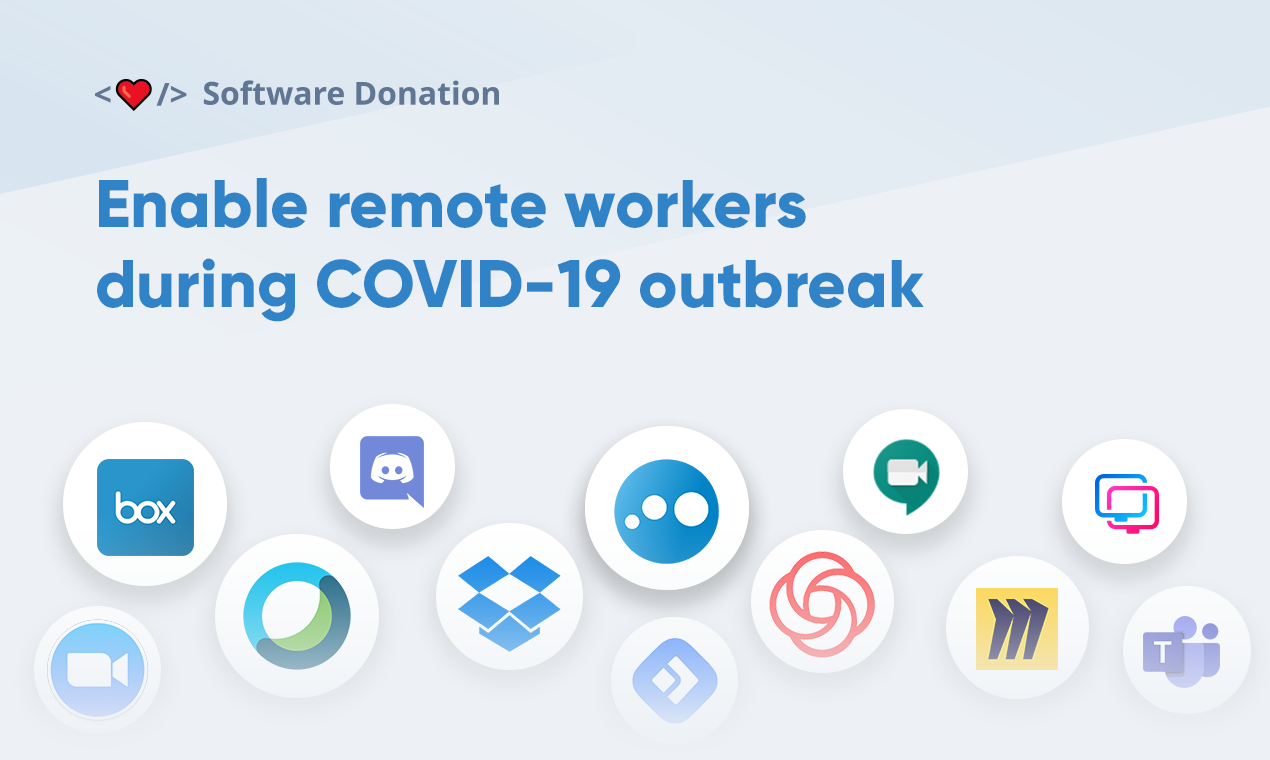
<style>
.page{position:relative;width:1270px;height:760px;background:#edf1f5}
.page>*{position:absolute;margin:0}
.t1{font:67px "Gilroy-ExtraBold";color:#3183c8}
</style>
<div class="page">
<p class="t1" style="left:97px;top:178px;width:827px;height:144px">Enable remote workers <br>during COVID-19 outbreak</p>
</div>
